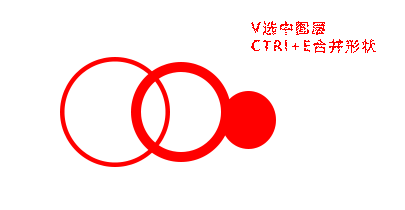
<style>
.page{position:relative;width:405px;height:210px;background:#ffffff}
.page>*{position:absolute;margin:0}
.t1{font:14px/18.3px "MicrosoftYaHei";letter-spacing:0.16em;color:#ff0000}
</style>
<div class="page">
<p class="t1" style="left:251px;top:21px;width:125px;height:33px;text-align:justify">V选中图层<br>CTRl+E合并形状</p>
</div>
